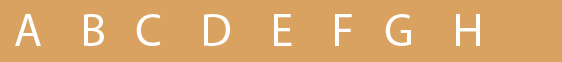
<style>
.page{position:relative;width:562px;height:62px;background:#d9a261}
.page>*{position:absolute;margin:0}
.t1{font:46px "MyriadPro-Regular";color:#ffffff}
</style>
<div class="page">
<p class="t1" style="left:15px;top:14px;width:465px;height:32px">A    B   C    D    E    F   G    H</p>
</div>
